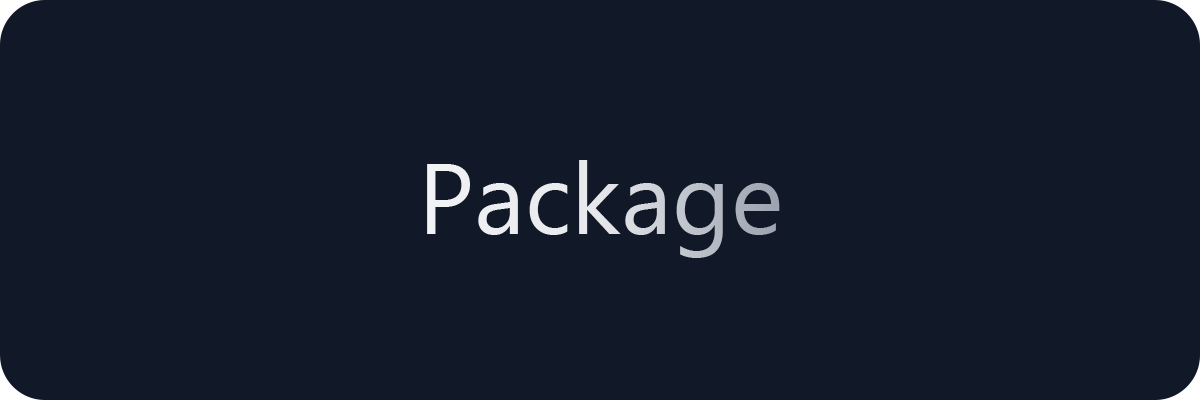
<style>
.page{position:relative;width:1200px;height:400px;background:#111827}
.page>*{position:absolute;margin:0}
.t1{font:100px "SegoeUI";color:#fffefe}
</style>
<div class="page">
<p class="t1" style="left:427px;top:160px;width:353px;height:98px">Package</p>
</div>
